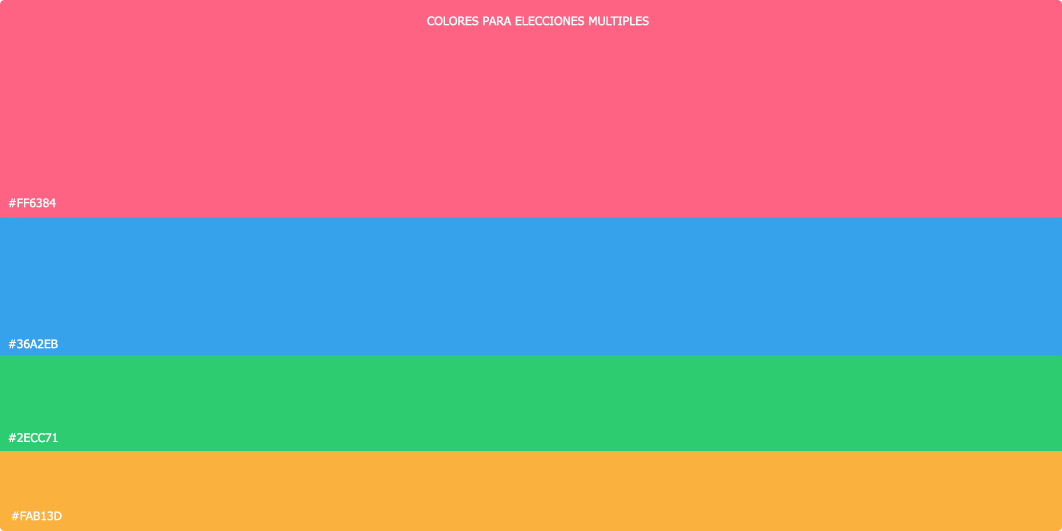
<style>
.page{position:relative;width:1062px;height:531px;background:#ff6384}
.page>*{position:absolute;margin:0}
.t1{font:11.7px "Tahoma";letter-spacing:0.01em;color:#ffffff;text-transform:uppercase}
.t2{font:12px "Tahoma";letter-spacing:0.01em;color:#ffffff;text-transform:uppercase}
.t3{font:11.7px "Tahoma";letter-spacing:0.01em;color:#ffffff;text-transform:uppercase;scale:1.03 1}
</style>
<div class="page">
<p class="t1" style="left:427px;top:16px;width:222px;height:10px">Colores para elecciones multiples</p>
<p class="t1" style="left:8px;top:198px;width:48px;height:10px">#ff6384</p>
<p class="t1" style="left:8px;top:339px;width:50px;height:10px">#36a2eb</p>
<p class="t2" style="left:8px;top:433px;width:50px;height:10px">#2ecc71</p>
<p class="t3" style="left:11px;top:511px;width:51px;height:10px">#fab13d</p>
</div>
